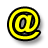
<style>
.page{position:relative;width:48px;height:48px;background:#ffffff}
.page>*{position:absolute;margin:0}
.t1{font:32px "Arial-BoldMT";color:#ffff00}
</style>
<div class="page">
<p class="t1" style="left:9px;top:8px;width:31px;height:32px">@</p>
</div>
